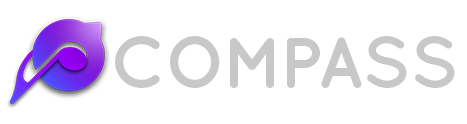
<style>
.page{position:relative;width:467px;height:124px;background:#ffffff}
.page>*{position:absolute;margin:0}
.t1{font:72px "QuicksandBold-Regular";color:#c8c8c8}
</style>
<div class="page">
<p class="t1" style="left:115px;top:36px;width:340px;height:52px">COMPASS</p>
</div>
